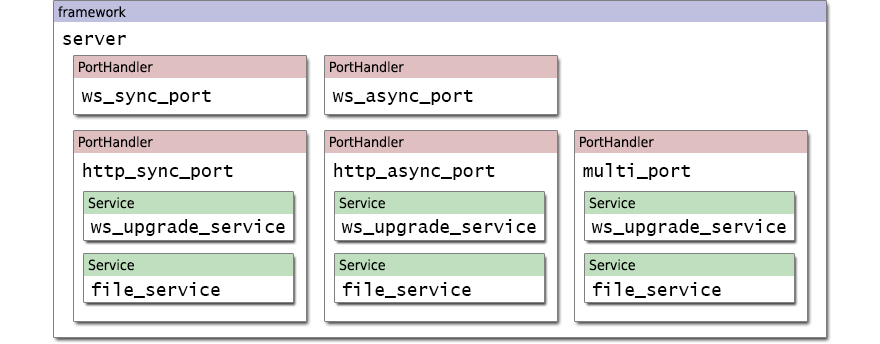
<style>
.page{position:relative;width:880px;height:344px;background:#ffffff}
.page>*{position:absolute;margin:0}
.t1{font:14px "DejaVuSansCondensed";color:#000000}
.t2{font:18px "LucidaConsole";color:#000000}
</style>
<div class="page">
<p class="t1" style="left:58px;top:6px;width:68px;height:12px">framework</p>
<p class="t2" style="left:63px;top:35px;width:63px;height:10px">server</p>
<p class="t1" style="left:79px;top:61px;width:74px;height:12px">PortHandler</p>
<p class="t1" style="left:330px;top:61px;width:74px;height:12px">PortHandler</p>
<p class="t2" style="left:81px;top:90px;width:130px;height:15px">ws_sync_port</p>
<p class="t2" style="left:332px;top:90px;width:141px;height:15px">ws_async_port</p>
<p class="t1" style="left:79px;top:136px;width:74px;height:12px">PortHandler</p>
<p class="t1" style="left:330px;top:136px;width:74px;height:12px">PortHandler</p>
<p class="t1" style="left:580px;top:136px;width:74px;height:12px">PortHandler</p>
<p class="t2" style="left:83px;top:163px;width:150px;height:17px">http_sync_port</p>
<p class="t2" style="left:334px;top:163px;width:161px;height:17px">http_async_port</p>
<p class="t2" style="left:583px;top:163px;width:108px;height:17px">multi_port</p>
<p class="t1" style="left:88px;top:197px;width:46px;height:12px">Service</p>
<p class="t1" style="left:339px;top:197px;width:46px;height:12px">Service</p>
<p class="t1" style="left:589px;top:197px;width:46px;height:12px">Service</p>
<p class="t2" style="left:90px;top:219px;width:195px;height:17px">ws_upgrade_service</p>
<p class="t2" style="left:341px;top:219px;width:195px;height:17px">ws_upgrade_service</p>
<p class="t2" style="left:591px;top:219px;width:195px;height:17px">ws_upgrade_service</p>
<p class="t1" style="left:88px;top:259px;width:46px;height:12px">Service</p>
<p class="t1" style="left:339px;top:259px;width:46px;height:12px">Service</p>
<p class="t1" style="left:589px;top:259px;width:46px;height:12px">Service</p>
<p class="t2" style="left:91px;top:282px;width:129px;height:16px">file_service</p>
<p class="t2" style="left:342px;top:282px;width:129px;height:16px">file_service</p>
<p class="t2" style="left:592px;top:282px;width:129px;height:16px">file_service</p>
</div>
